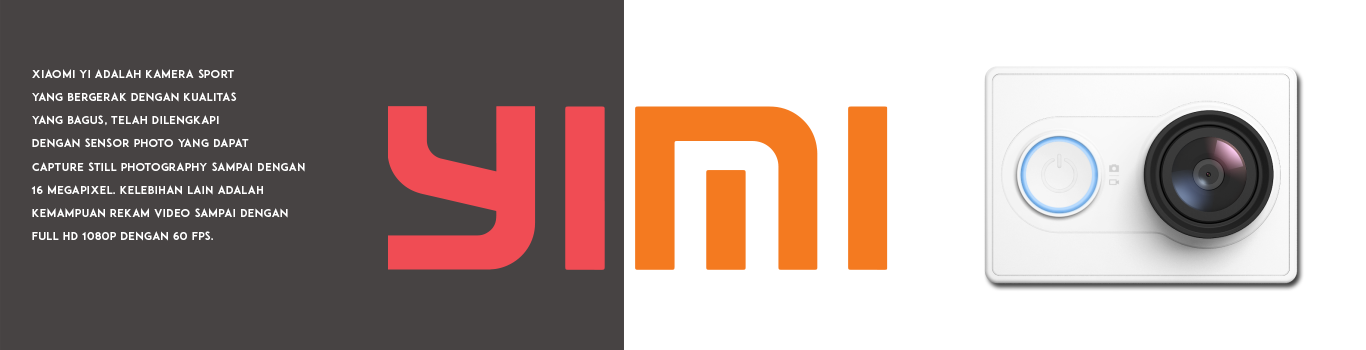
<style>
.page{position:relative;width:1366px;height:350px;background:#474343}
.page>*{position:absolute;margin:0}
.t1{font:11px "ADAM.CGPRO";letter-spacing:0.05em;color:#ffffff}
</style>
<div class="page">
<p class="t1" style="left:31px;top:69px;width:274px;height:172px">XIAOMI YI adalah kamera sport  <br>yang bergerak dengan kualitas <br>yang bagus, telah dilengkapi <br>dengan sensor photo yang dapat <br>capture still photography sampai dengan <br>16 megapixel. Kelebihan lain adalah <br>kemampuan rekam video sampai dengan <br>full HD 1080p dengan 60 fps.</p>
</div>
